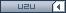
<style>
.page{position:relative;width:66px;height:13px}
.page>*{position:absolute;margin:0}
.t1{font:8px "BitDustTwo";color:#4c617e}
</style>
<div class="page">
<p class="t1" style="left:18px;top:4px;width:17px;height:5px">U2U</p>
</div>
